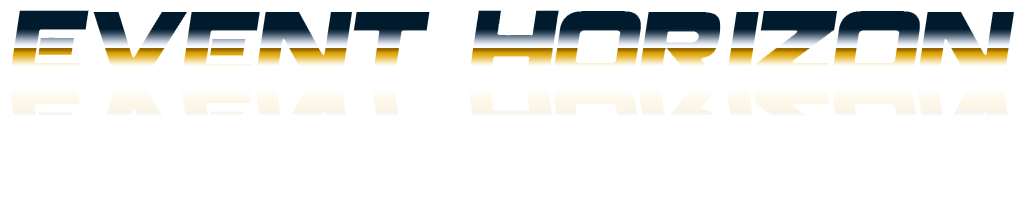
<style>
.page{position:relative;width:1024px;height:204px;background:#ffffff}
.page>*{position:absolute;margin:0}
.t1{font:101px "Coalition";font-weight:bold;font-style:italic;scale:0.86 1}
</style>
<div class="page">
<p class="t1" style="left:8px;top:9px;width:1007px;height:76px">Event Horizon</p>
</div>
